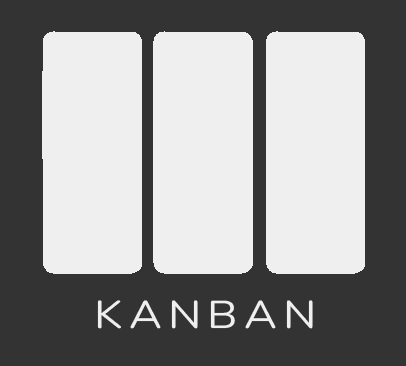
<style>
.page{position:relative;width:406px;height:366px;background:#333333}
.page>*{position:absolute;margin:0}
.t1{font:66.5px "Nunito-Regular";letter-spacing:0.14em;color:#efefef;scale:1.16 1}
</style>
<div class="page">
<p class="t1" style="left:97px;top:300px;width:216px;height:29px">KANBAN</p>
</div>
